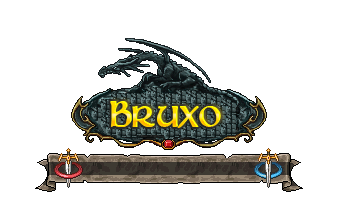
<style>
.page{position:relative;width:338px;height:197px;background:#ffffff}
.page>*{position:absolute;margin:0}
.t1{font:42.7px "Martel";scale:0.94 1}
</style>
<div class="page">
<p class="t1" style="left:110px;top:101px;width:111px;height:27px">Bruxo</p>
</div>
